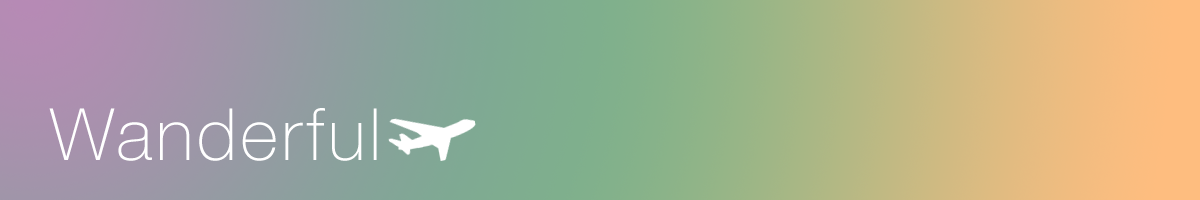
<style>
.page{position:relative;width:1200px;height:200px}
.page>*{position:absolute;margin:0}
.t1{font:72px "HelveticaNeue-Thin";letter-spacing:0.05em;color:#ffffff}
</style>
<div class="page">
<p class="t1" style="left:49px;top:108px;width:328px;height:53px">Wanderful</p>
</div>
